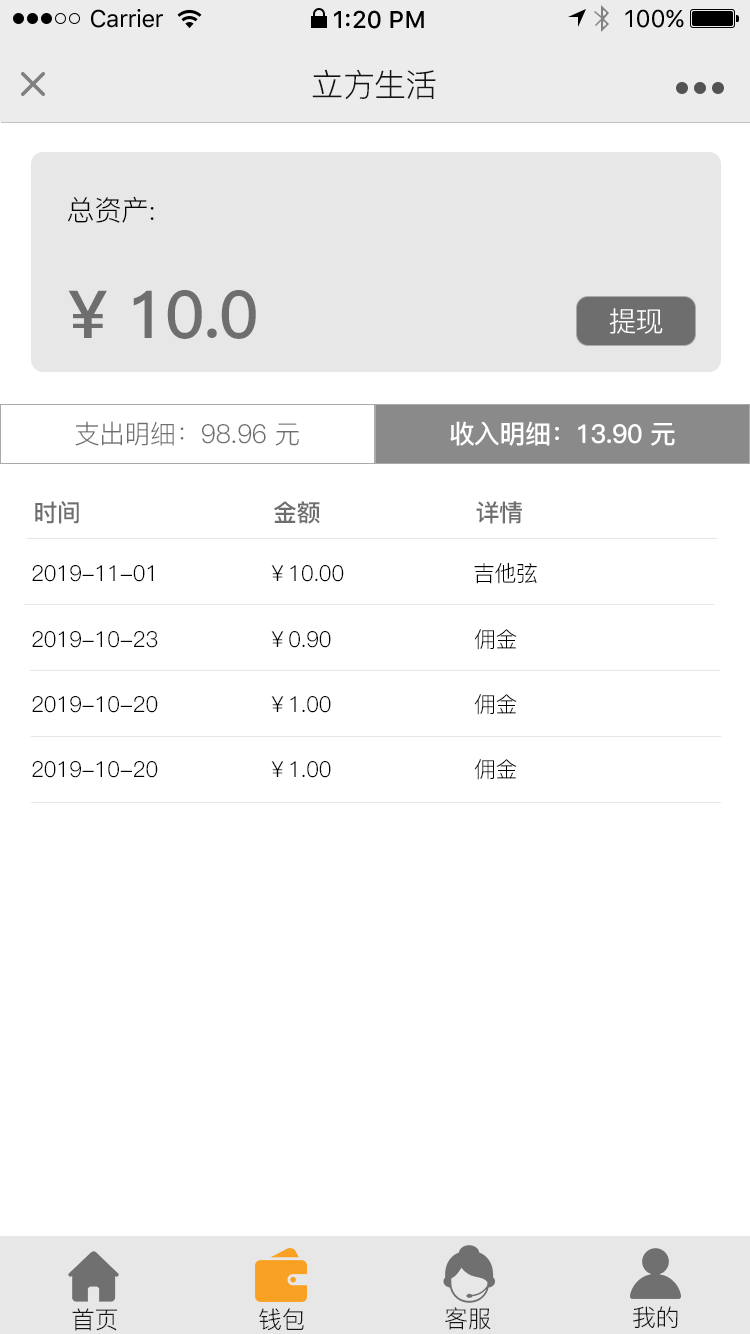
<style>
.page{position:relative;width:750px;height:1334px;background:#ffffff}
.page>*{position:absolute;margin:0}
.t1{font:24px "SFUIText-Regular";letter-spacing:-0.025em;color:#000000}
.t2{font:24px "SFUIText-Medium";color:#000000}
.t3{font:24px "SFUIText-Regular";color:#000000}
.t4{font:32.2px "PingFang-SC-Regular";letter-spacing:-0.02em;color:#141414}
.t5{font:28px "PingFang-SC-Regular";letter-spacing:-0.024em;color:#000000}
.t6{font:66px "PingFang-SC-Bold";letter-spacing:-0.024em;color:#6e6e6e}
.t7{font:28px "PingFang-SC-Regular";letter-spacing:-0.024em;color:#ffffff}
.t8{font:26px "PingFang-SC-Regular";letter-spacing:-0.024em;color:#6e6e6e}
.t9{font:26px "PingFang-SC-Bold";letter-spacing:-0.024em;color:#ffffff}
.t10{font:24px "PingFang-SC-Bold";letter-spacing:-0.024em;color:#6e6e6e}
.t11{font:22px "PingFang-SC-Regular";letter-spacing:-0.024em;color:#000000}
.t12{font:24px "PingFang-SC-Regular";letter-spacing:-0.02em;color:#141414}
</style>
<div class="page">
<p class="t1" style="left:91px;top:9px;width:72px;height:19px">Carrier</p>
<p class="t2" style="left:334px;top:10px;width:90px;height:19px">1:20 PM</p>
<p class="t3" style="left:625px;top:9px;width:59px;height:19px">100%</p>
<p class="t4" style="left:312px;top:69px;width:124px;height:31px">立方生活</p>
<p class="t5" style="left:67px;top:196px;width:87px;height:27px">总资产:</p>
<p class="t6" style="left:68px;top:290px;width:188px;height:49px">¥ 10.0</p>
<p class="t7" style="left:609px;top:308px;width:54px;height:26px">提现</p>
<p class="t8" style="left:75px;top:421px;width:224px;height:25px">支出明细：98.96 元</p>
<p class="t9" style="left:450px;top:421px;width:225px;height:25px">收入明细：13.90 元</p>
<p class="t10" style="left:35px;top:501px;width:487px;height:23px">时间                          金额                     详情</p>
<p class="t11" style="left:32px;top:563px;width:505px;height:21px">2019-11-01                ￥10.00                   吉他弦</p>
<p class="t11" style="left:32px;top:629px;width:485px;height:21px">2019-10-23                ￥0.90                     佣金</p>
<p class="t11" style="left:32px;top:694px;width:485px;height:21px">2019-10-20                ￥1.00                     佣金</p>
<p class="t11" style="left:32px;top:759px;width:485px;height:21px">2019-10-20                ￥1.00                     佣金</p>
<p class="t12" style="left:72px;top:1308px;width:45px;height:23px">首页</p>
<p class="t12" style="left:259px;top:1308px;width:45px;height:23px">钱包</p>
<p class="t12" style="left:445px;top:1307px;width:46px;height:23px">客服</p>
<p class="t12" style="left:633px;top:1306px;width:45px;height:22px">我的</p>
</div>
